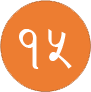
<style>
.page{position:relative;width:91px;height:92px;background:#ed7d31}
.page>*{position:absolute;margin:0}
.t1{font:48px "FontasyHimali";color:#ffffff}
</style>
<div class="page">
<p class="t1" style="left:19px;top:29px;width:53px;height:40px">15</p>
</div>
